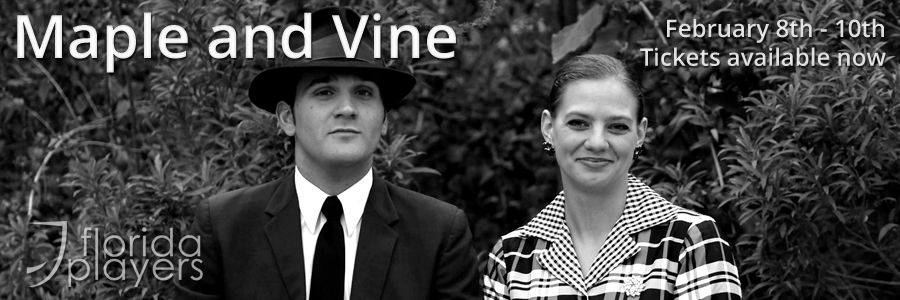
<style>
.page{position:relative;width:900px;height:300px}
.page>*{position:absolute;margin:0}
.t1{font:60px "OpenSans-Semibold";color:#ffffff}
.t2{font:24px "OpenSans-Semibold";color:#dfdfdf}
</style>
<div class="page">
<p class="t1" style="left:17px;top:12px;width:439px;height:61px">Maple and Vine</p>
<p class="t2" style="left:640px;top:18px;width:246px;height:48px;text-align:right">February 8th - 10th<br>Tickets available now</p>
</div>
